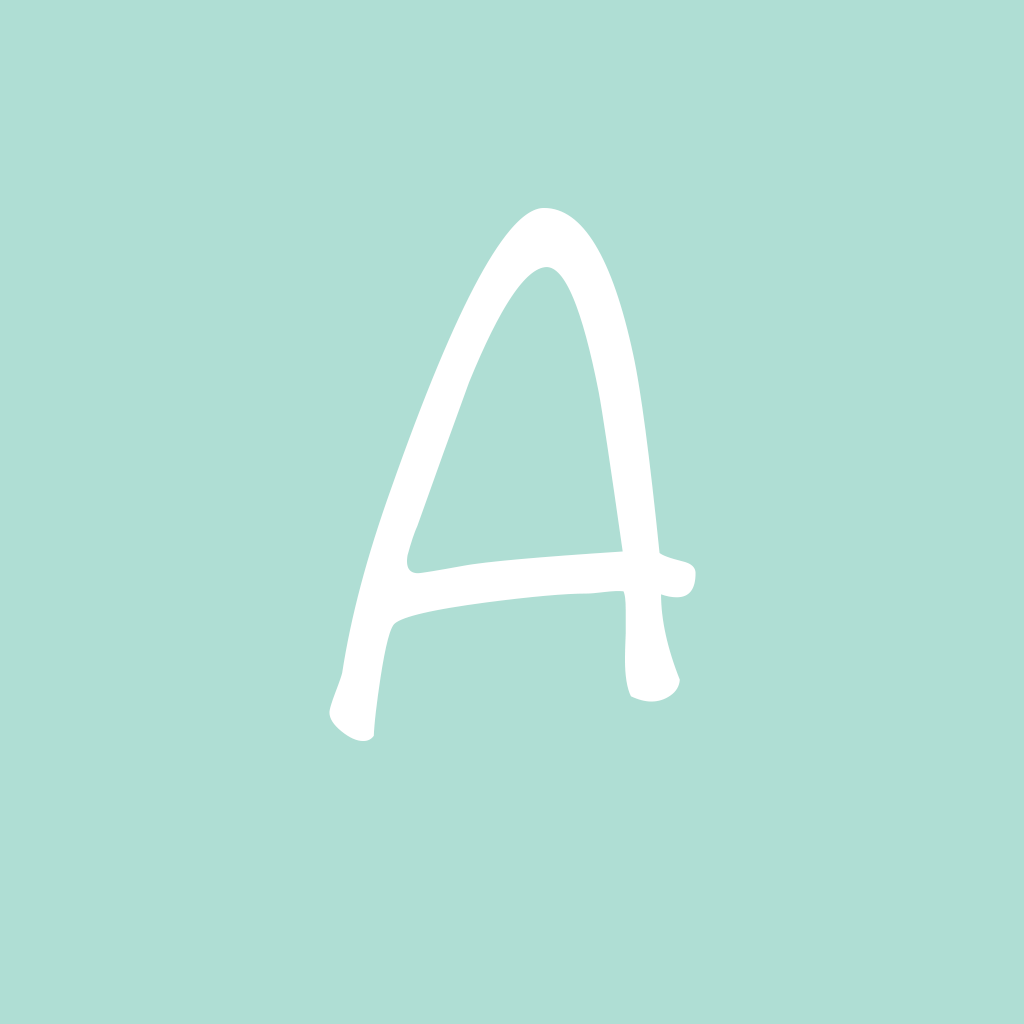
<style>
.page{position:relative;width:1024px;height:1024px;background:#afded4}
.page>*{position:absolute;margin:0}
.t1{font:600px "Noteworthy-Light";color:#ffffff}
</style>
<div class="page">
<p class="t1" style="left:329px;top:208px;width:367px;height:533px">A</p>
</div>
